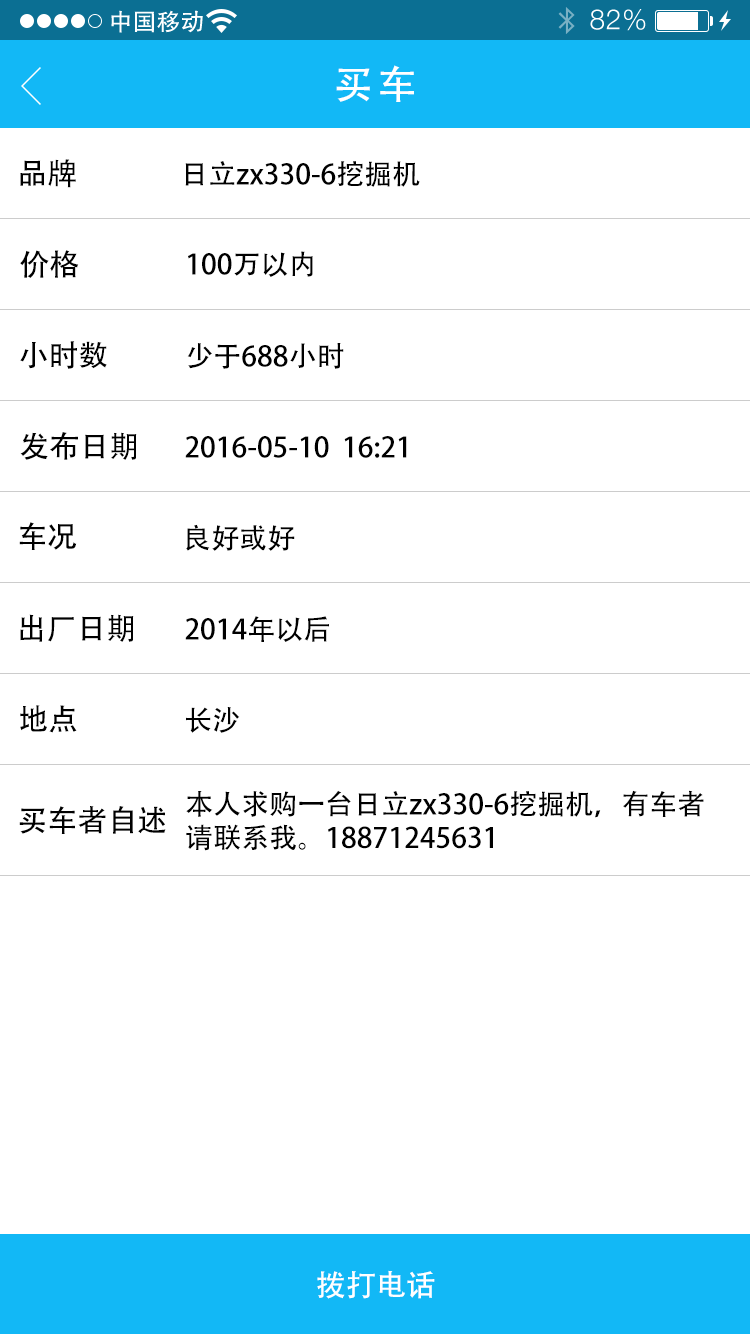
<style>
.page{position:relative;width:750px;height:1334px;background:#ffffff}
.page>*{position:absolute;margin:0}
.t1{font:40px "AdobeHeitiStd-Regular";letter-spacing:0.104em;color:#ffffff}
.t2{font:30px "AdobeHeitiStd-Regular";color:#000000}
.t3{font:28px "AdobeHeitiStd-Regular";color:#000000}
.t4{font:28px/70px "AdobeHeitiStd-Regular";color:#000000}
.t5{font:30px "AdobeHeitiStd-Regular";color:#ffffff}
</style>
<div class="page">
<p class="t1" style="left:336px;top:65px;width:78px;height:37px">买车</p>
<p class="t2" style="left:20px;top:159px;width:56px;height:29px">品牌</p>
<p class="t3" style="left:185px;top:161px;width:235px;height:26px">日立zx330-6挖掘机</p>
<p class="t2" style="left:20px;top:250px;width:59px;height:28px">价格</p>
<p class="t3" style="left:188px;top:251px;width:125px;height:26px">100万以内</p>
<p class="t2" style="left:20px;top:341px;width:87px;height:28px">小时数</p>
<p class="t3" style="left:187px;top:343px;width:157px;height:26px">少于688小时</p>
<p class="t2" style="left:20px;top:432px;width:117px;height:28px">发布日期</p>
<p class="t3" style="left:185px;top:436px;width:222px;height:22px">2016-05-10  16:21</p>
<p class="t2" style="left:19px;top:522px;width:58px;height:28px">车况</p>
<p class="t3" style="left:186px;top:524px;width:109px;height:27px">良好或好</p>
<p class="t2" style="left:20px;top:614px;width:114px;height:28px">出厂日期</p>
<p class="t3" style="left:185px;top:616px;width:144px;height:26px">2014年以后</p>
<p class="t2" style="left:20px;top:705px;width:57px;height:28px">地点</p>
<p class="t3" style="left:186px;top:707px;width:54px;height:26px">长沙</p>
<p class="t3" style="left:186px;top:790px;width:518px;height:61px">本人求购一台<span class="t4">日立zx330-6挖掘机</span>，有车者<br>请联系我。18871245631</p>
<p class="t2" style="left:19px;top:806px;width:147px;height:28px">买车者自述</p>
<p class="t5" style="left:317px;top:1270px;width:118px;height:29px">拨打电话</p>
</div>
